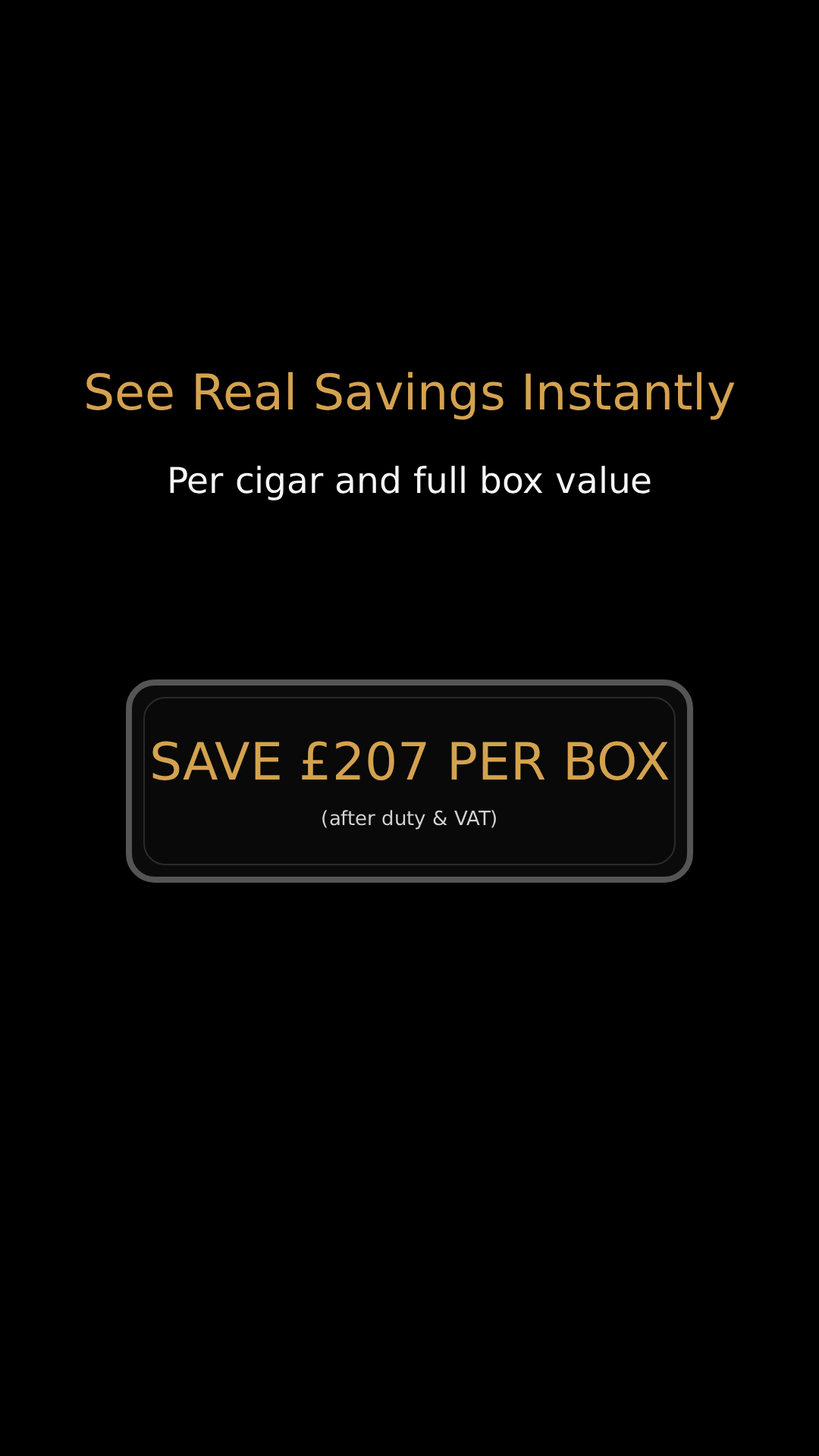
<style>
.page{position:relative;width:819px;height:1456px;background:#000000}
.page>*{position:absolute;margin:0}
.t1{font:49.3px "Arial";color:#d4a24f}
.t2{font:35.6px "Arial";color:#f6f6f6}
.t3{font:51.6px "Arial";color:#d4a24f}
.t4{font:19.7px "Arial";color:#d3d3d3}
</style>
<div class="page">
<p class="t1" style="left:86px;top:372px;width:649px;height:48px">See Real Savings Instantly</p>
<p class="t2" style="left:170px;top:466px;width:481px;height:34px">Per cigar and full box value</p>
<p class="t3" style="left:152px;top:741px;width:517px;height:39px">SAVE £207 PER BOX</p>
<p class="t4" style="left:322px;top:810px;width:174px;height:20px">(after duty &amp; VAT)</p>
</div>
